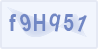
<style>
.page{position:relative;width:98px;height:49px;background:#f1f5fd}
.page>*{position:absolute;margin:0}
.t1{font:24px "ArialNarrow-Bold";color:#7187c4}
</style>
<div class="page">
<p class="t1" style="left:9px;top:14px;width:8px;height:17px">f</p>
<p class="t1" style="left:20px;top:14px;width:11px;height:18px;rotate:-14deg">9</p>
<p class="t1" style="left:34px;top:14px;width:12px;height:17px">H</p>
<p class="t1" style="left:49px;top:13px;width:12px;height:19px;rotate:11deg">q</p>
<p class="t1" style="left:63px;top:14px;width:11px;height:17px">5</p>
<p class="t1" style="left:78px;top:15px;width:9px;height:17px;rotate:22deg">1</p>
</div>
